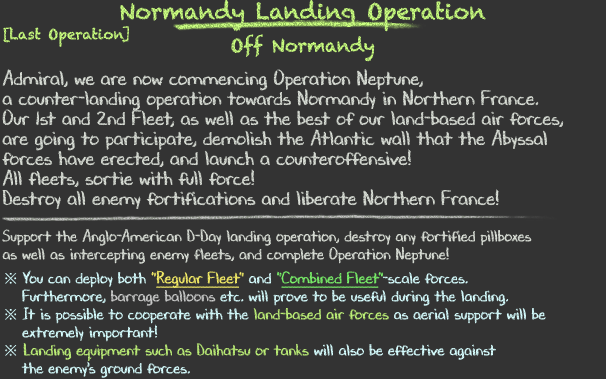
<style>
.page{position:relative;width:606px;height:379px;background:#333333}
.page>*{position:absolute;margin:0}
.t1{font:22px/36px "Chalkduster";color:#bded78}
.t2{font:18px/36px "Chalkduster";color:#bded78}
.t3{font:14px "Chalkduster";color:#bded78}
.t4{font:20px/20px "DJBChalkItUp";color:#d9ded6}
.t5{font:16px/18px "DJBChalkItUp";color:#d9ded6}
.t6{font:16px/24px "DJBChalkItUp";color:#d9ded6}
.t7{font:16px/18px "TimesNewRomanPSMT";color:#d7feff}
.t8{font:16px/18px "DJBChalkItUp";color:#d7feff}
.t9{font:16px/18px "DJBChalkItUp";color:#f5ed68}
.t10{font:16px/18px "DJBChalkItUp";color:#f5ed68;text-decoration:underline}
.t11{font:16px/18px "DJBChalkItUp";color:#7bf26b}
.t12{font:16px/18px "DJBChalkItUp";color:#7bf26b;text-decoration:underline}
.t13{font:16px/18px "DJBChalkItUp";color:#c9cac9}
.t14{font:16px/18px "DJBChalkItUp";color:#bdef78}
</style>
<div class="page">
<p class="t1" style="left:120px;top:0px;width:366px;height:62px;text-align:center">Normandy Landing Operation<br><span class="t2">Off Normandy</span></p>
<p class="t3" style="left:3px;top:26px;width:126px;height:21px">[Last Operation]</p>
<p class="t4" style="left:2px;top:69px;width:562px;height:309px">Admiral, we are now commencing Operation Neptune,<br>a counter-landing operation towards Normandy in Northern France.<br>Our 1st and 2nd Fleet, as well as the best of our land-based air forces,<br>are going to participate, demolish the Atlantic wall that the Abyssal<br>forces have erected, and launch a counteroffensive!<br>All fleets, sortie with full force!<br>Destroy all enemy fortifications and liberate Northern France!<br><br><span class="t5">Support the Anglo-American D-Day landing operation, destroy any fortified pillboxes<br>as well as intercepting enemy fleets, and complete Operation Neptune</span><span class="t6">!<br></span><span class="t7">※ </span><span class="t8">You can deploy both </span><span class="t9">"</span><span class="t10">Regular Fleet</span><span class="t9">"</span><span class="t8"> and </span><span class="t11">"</span><span class="t12">Combined Fleet</span><span class="t11">"</span><span class="t8">-scale forces.<br>　 Furthermore, </span><span class="t13">barrage balloons</span><span class="t8"> etc. will prove to be useful during the landing.<br></span><span class="t7">※ </span><span class="t8">It is possible to cooperate with the </span><span class="t14">land-based air forces</span><span class="t8"> as aerial support will be<br>　 extremely important!<br></span><span class="t7">※ </span><span class="t14">Landing equipment such as Daihatsu or tanks</span><span class="t8"> will also be effective against<br>　 the enemy's ground forces.</span></p>
</div>
